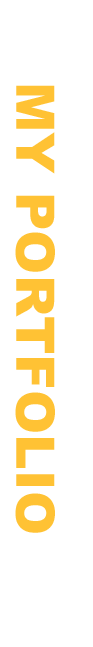
<style>
.page{position:relative;width:93px;height:647px;background:#ffffff}
.page>*{position:absolute;margin:0}
.t1{font:53.2px "Arial-Black";color:#ffc234}
</style>
<div class="page">
<p class="t1" style="left:15px;top:85px;width:40px;height:448px;rotate:90deg">MY PORTFOLIO</p>
</div>
